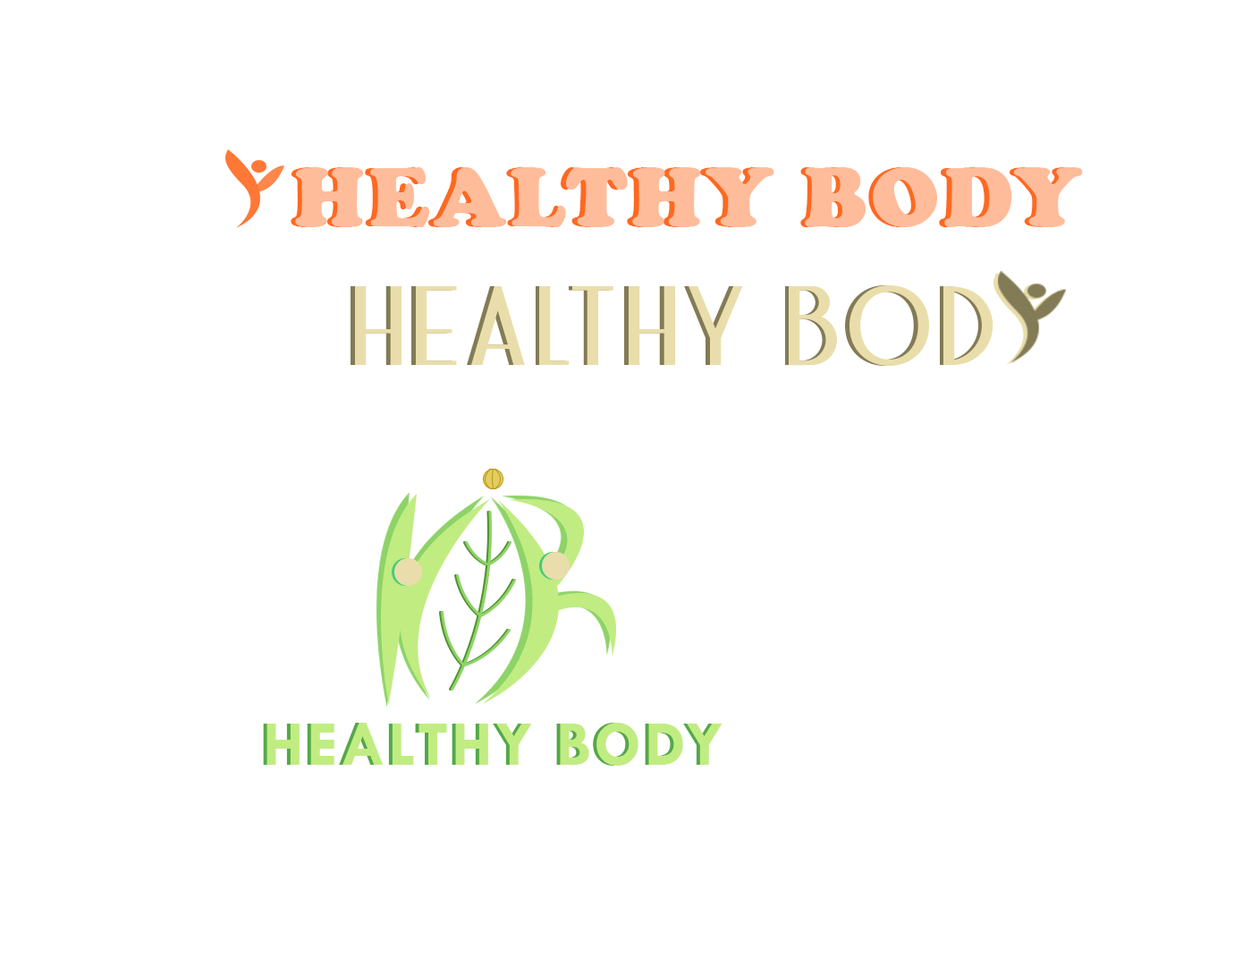
<style>
.page{position:relative;width:1234px;height:966px;background:#ffffff}
.page>*{position:absolute;margin:0}
.t1{font:87.2px "CooperBlack";letter-spacing:0.05em;color:#ffbc9b}
.t2{font:113.1px "BandoengscheDEMO";letter-spacing:0.05em}
.t3{font:113.1px "BandoengscheDEMO";letter-spacing:0.05em;color:#e9deab}
.t4{font:64.4px "TwCenMT-Bold";letter-spacing:0.05em;color:#c1ec82}
</style>
<div class="page">
<p class="t1" style="left:291px;top:167px;width:788px;height:60px">HEALTHY BODY</p>
<p class="t1" style="left:295px;top:167px;width:788px;height:60px">HEALTHY BODY</p>
<p class="t2" style="left:351px;top:285px;width:639px;height:81px">HEALTHY BOD</p>
<p class="t3" style="left:355px;top:285px;width:639px;height:81px">HEALTHY BOD</p>
<p class="t4" style="left:263px;top:723px;width:456px;height:43px">HEALTHY BODY</p>
<p class="t4" style="left:267px;top:723px;width:456px;height:43px">HEALTHY BODY</p>
</div>
